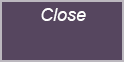
<style>
.page{position:relative;width:124px;height:62px;background:#56465f}
.page>*{position:absolute;margin:0}
.t1{font:18px "Arial-ItalicMT";color:#fefefe}
</style>
<div class="page">
<p class="t1" style="left:41px;top:8px;width:45px;height:13px">Close</p>
</div>
